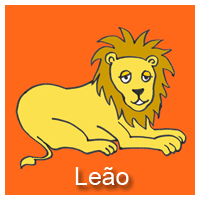
<style>
.page{position:relative;width:200px;height:200px;background:#ff6819}
.page>*{position:absolute;margin:0}
.t1{font:25px "ArialMT";color:#ffffff}
</style>
<div class="page">
<p class="t1" style="left:75px;top:167px;width:54px;height:18px">Leão</p>
</div>
